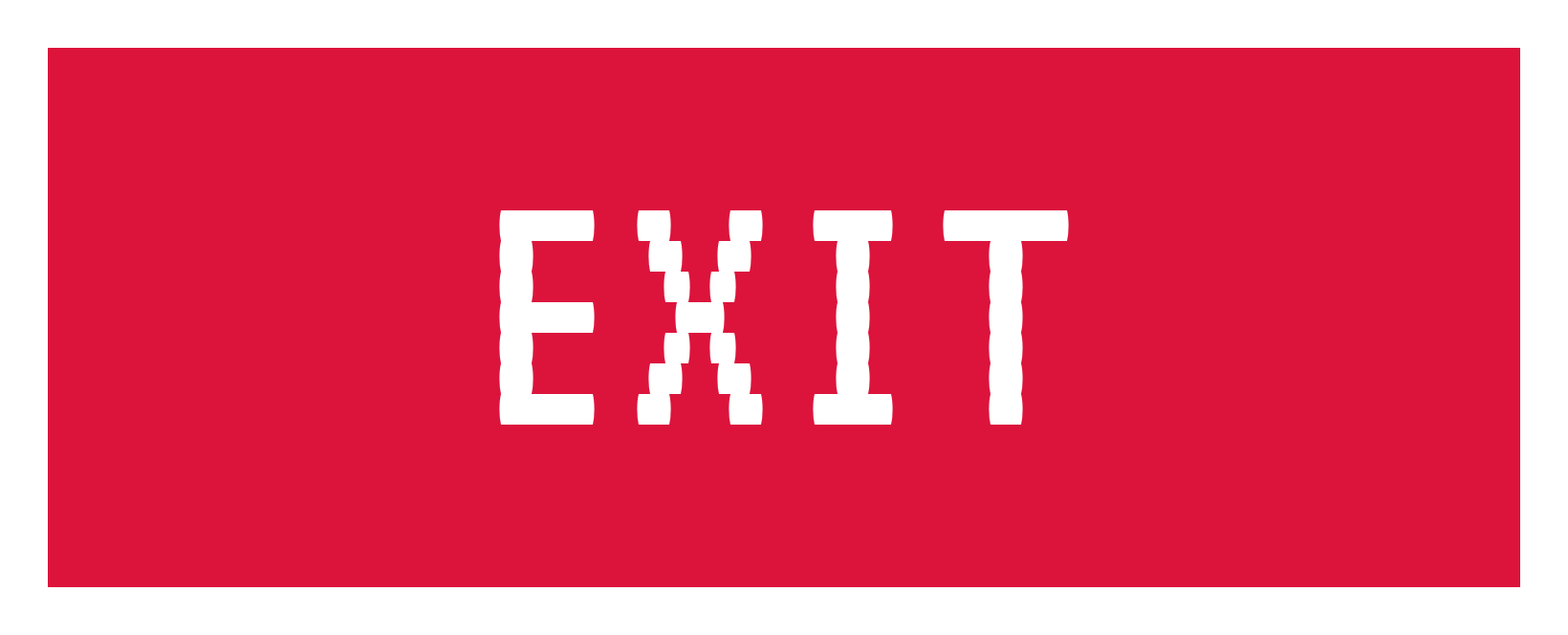
<style>
.page{position:relative;width:1568px;height:635px;background:#dc143c}
.page>*{position:absolute;margin:0}
.t1{font:382.4px "VT323-Regular";color:#ffffff}
</style>
<div class="page">
<p class="t1" style="left:499px;top:210px;width:570px;height:215px">EXIT</p>
</div>
